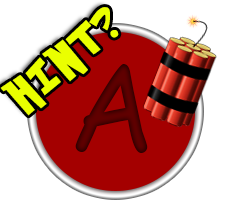
<style>
.page{position:relative;width:228px;height:210px;background:#ffffff}
.page>*{position:absolute;margin:0}
.t1{font:36px "PokemonSolidNormal";letter-spacing:0.2em;color:#eaff00}
.t2{font:120px "ComicSansMS";color:#540000}
</style>
<div class="page">
<p class="t1" style="left:0px;top:7px;width:119px;height:109px;rotate:-40deg">HINT?</p>
<p class="t2" style="left:75px;top:64px;width:73px;height:89px">A</p>
</div>
